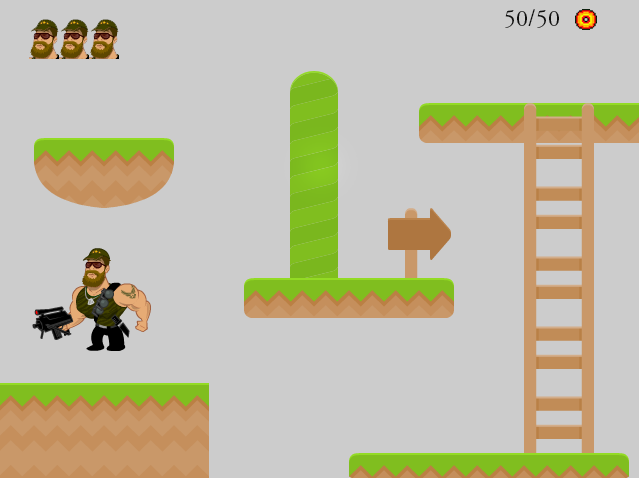
<style>
.page{position:relative;width:639px;height:478px;background:#cccccc}
.page>*{position:absolute;margin:0}
.t1{font:24px "AGaramondPro-Regular";color:#0f0f0e}
</style>
<div class="page">
<p class="t1" style="left:505px;top:9px;width:54px;height:19px">50/50</p>
</div>
